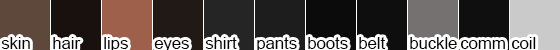
<style>
.page{position:relative;width:560px;height:50px}
.page>*{position:absolute;margin:0}
.t1{font:16.7px "ArialMT";color:#000000}
</style>
<div class="page">
<p class="t1" style="left:1px;top:37px;width:29px;height:12px">skin</p>
<p class="t1" style="left:53px;top:37px;width:28px;height:12px">hair</p>
<p class="t1" style="left:104px;top:37px;width:24px;height:15px">lips</p>
<p class="t1" style="left:154px;top:40px;width:35px;height:12px">eyes</p>
<p class="t1" style="left:205px;top:37px;width:32px;height:12px">shirt</p>
<p class="t1" style="left:257px;top:37px;width:40px;height:15px">pants</p>
<p class="t1" style="left:308px;top:37px;width:40px;height:12px">boots</p>
<p class="t1" style="left:359px;top:37px;width:27px;height:12px">belt</p>
<p class="t1" style="left:410px;top:37px;width:47px;height:12px">buckle</p>
<p class="t1" style="left:460px;top:40px;width:45px;height:9px">comm</p>
<p class="t1" style="left:511px;top:37px;width:25px;height:12px">coil</p>
</div>
